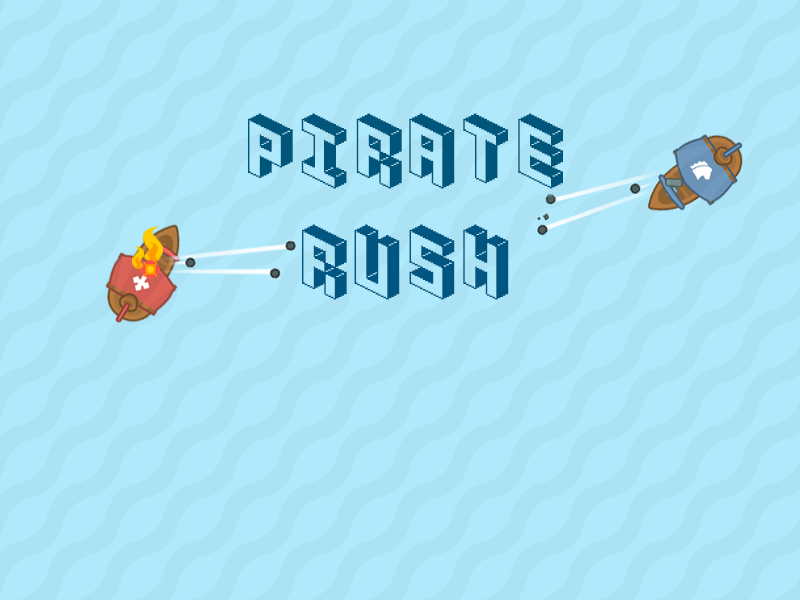
<style>
.page{position:relative;width:800px;height:600px;background:#b0e9fc}
.page>*{position:absolute;margin:0}
.t1{font:84px "Pixel-art-Struct";color:#00567a}
.t2{font:84px "Pixel-art-Struct";color:#005581}
</style>
<div class="page">
<p class="t1" style="left:248px;top:113px;width:315px;height:76px">PIRATE</p>
<p class="t2" style="left:302px;top:224px;width:207px;height:76px">RUSH</p>
</div>
